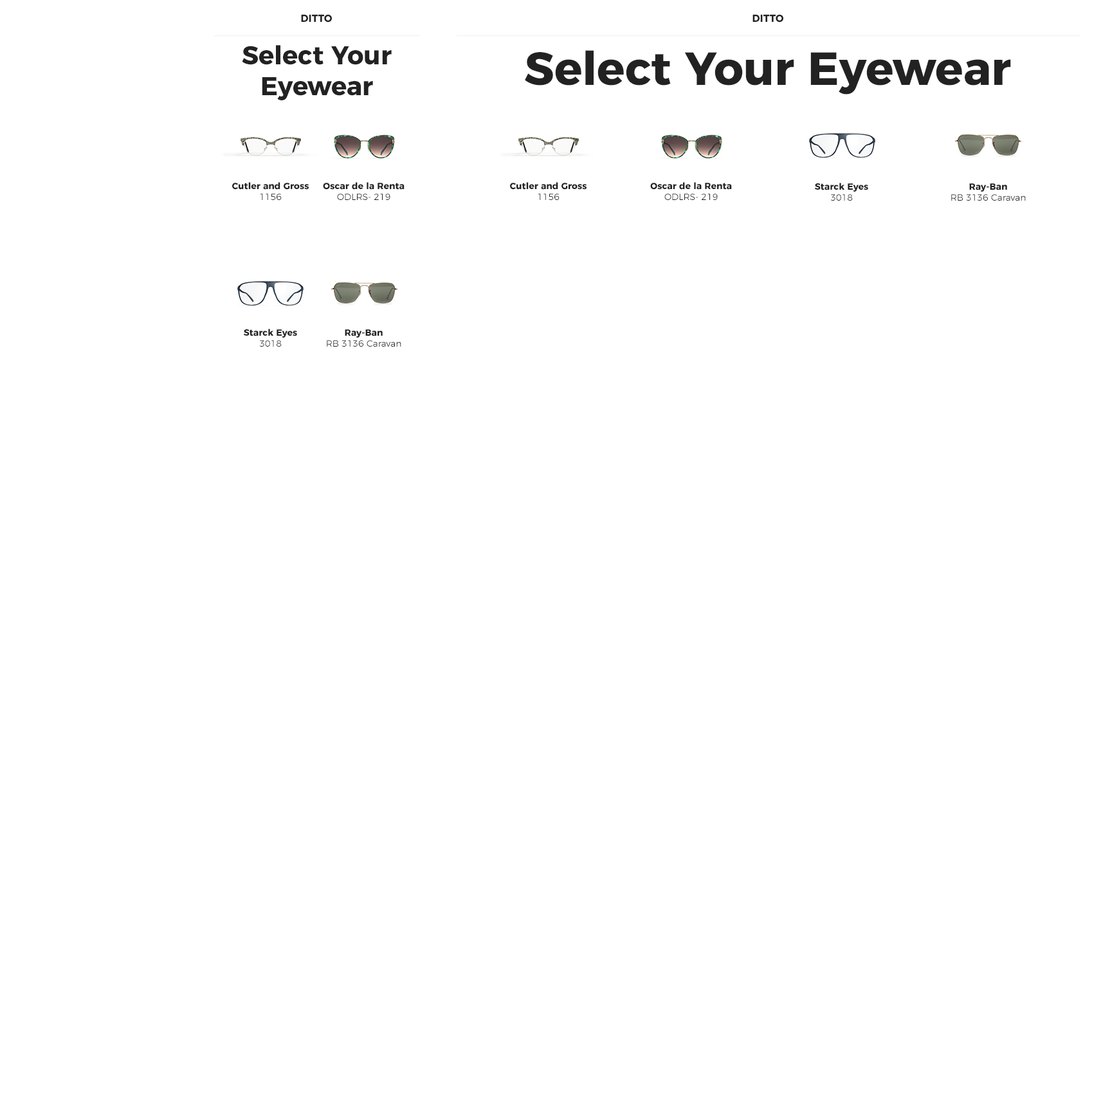
<style>
.page{position:relative;width:1112px;height:1101px;background:#ffffff}
.page>*{position:absolute;margin:0}
.t1{font:10.3px "Montserrat-Bold";color:#222222}
.t2{font:25.7px "Montserrat-Bold";color:#222222}
.t3{font:46.3px "Montserrat-Bold";color:#222222}
.t4{font:9px "Montserrat-Bold";color:#222222}
.t5{font:9px "Montserrat-Light";color:#222222}
</style>
<div class="page">
<p class="t1" style="left:301px;top:14px;width:31px;height:8px">DITTO</p>
<p class="t1" style="left:752px;top:14px;width:31px;height:8px">DITTO</p>
<p class="t2" style="left:242px;top:45px;width:150px;height:55px;text-align:center">Select Your<br>Eyewear</p>
<p class="t3" style="left:525px;top:50px;width:486px;height:44px">Select Your Eyewear</p>
<p class="t4" style="left:232px;top:182px;width:77px;height:18px;text-align:center">Cutler and Gross<br><span class="t5">1156</span></p>
<p class="t4" style="left:323px;top:182px;width:81px;height:18px;text-align:center">Oscar de la Renta<br><span class="t5">ODLRS- 219</span></p>
<p class="t4" style="left:510px;top:182px;width:76px;height:18px;text-align:center">Cutler and Gross<br><span class="t5">1156</span></p>
<p class="t4" style="left:650px;top:182px;width:82px;height:18px;text-align:center">Oscar de la Renta<br><span class="t5">ODLRS- 219</span></p>
<p class="t4" style="left:815px;top:183px;width:53px;height:18px;text-align:center">Starck Eyes<br><span class="t5">3018</span></p>
<p class="t5" style="left:951px;top:183px;width:74px;height:18px;text-align:center"><span class="t4">Ray-Ban<br></span>RB 3136 Caravan</p>
<p class="t4" style="left:244px;top:328px;width:53px;height:18px;text-align:center">Starck Eyes<br><span class="t5">3018</span></p>
<p class="t5" style="left:327px;top:329px;width:74px;height:17px;text-align:center"><span class="t4">Ray-Ban<br></span>RB 3136 Caravan</p>
</div>
